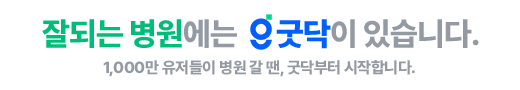
<style>
.page{position:relative;width:520px;height:90px;background:#ffffff}
.page>*{position:absolute;margin:0}
.t1{font:32px "Pretendard-ExtraBold";letter-spacing:-0.02em;color:#00bc7b}
.t2{font:32px "Pretendard-ExtraBold";letter-spacing:-0.02em;color:#949aa4}
.t3{font:32px "Pretendard-Black";letter-spacing:-0.02em;color:#0060ff}
.t4{font:16px "Pretendard-ExtraBold";letter-spacing:-0.02em;color:#949aa4}
</style>
<div class="page">
<p class="t1" style="left:42px;top:19px;width:195px;height:29px">잘되는 병원<span class="t2">에는</span></p>
<p class="t2" style="left:276px;top:19px;width:203px;height:30px"><span class="t3">굿닥</span>이 있습니다.</p>
<p class="t4" style="left:103px;top:60px;width:312px;height:17px">1,000만 유저들이 병원 갈 땐, 굿닥부터 시작합니다.</p>
</div>
